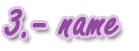
<style>
.page{position:relative;width:139px;height:51px;background:#ffffff}
.page>*{position:absolute;margin:0}
.t1{font:52.8px "FreestyleScript-Regular";color:#92499e;font-weight:bold;scale:0.91 1}
</style>
<div class="page">
<p class="t1" style="left:4px;top:9px;width:115px;height:29px">3.- name</p>
</div>
